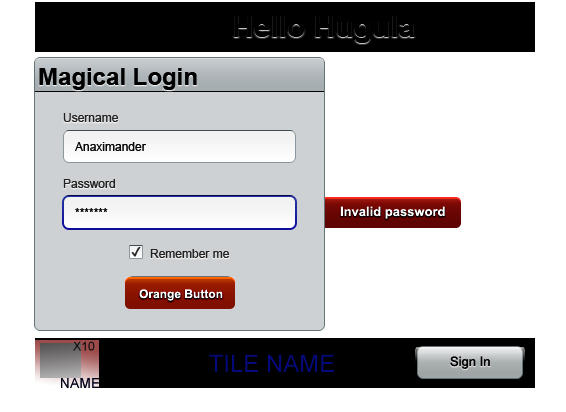
<style>
.page{position:relative;width:566px;height:412px;background:#ffffff}
.page>*{position:absolute;margin:0}
.t1{font:24px "Arial-BoldMT";color:#010101}
.t2{font:12px "ArialMT";color:#222222}
.t3{font:12px "ArialMT";color:#080808}
.t4{font:13px "Arial-BoldMT";color:#ffffff}
.t5{font:12px "SegoeUISymbol";color:#222222;font-weight:bold}
.t6{font:12px "Arial-BoldMT";color:#ffffff}
.t7{font:12px "ArialMT";color:#0a0a0a;text-transform:uppercase}
.t8{font:24px "ArialMT";color:#05097a;text-transform:uppercase}
.t9{font:13px "ArialMT";color:#000000}
.t10{font:14px "ArialMT";color:#030314;text-transform:uppercase}
</style>
<div class="page">
<p class="t1" style="left:39px;top:68px;width:158px;height:22px">Magical Login</p>
<p class="t2" style="left:63px;top:113px;width:55px;height:9px">Username</p>
<p class="t3" style="left:75px;top:142px;width:71px;height:9px">Anaximander</p>
<p class="t2" style="left:63px;top:179px;width:52px;height:9px">Password</p>
<p class="t3" style="left:75px;top:208px;width:33px;height:4px">*******</p>
<p class="t4" style="left:340px;top:206px;width:105px;height:13px">Invalid password</p>
<p class="t5" style="left:131px;top:246px;width:10px;height:11px">✓</p>
<p class="t2" style="left:150px;top:249px;width:79px;height:9px">Remember me</p>
<p class="t6" style="left:139px;top:289px;width:84px;height:12px">Orange Button</p>
<p class="t7" style="left:73px;top:341px;width:22px;height:10px">x10</p>
<p class="t8" style="left:209px;top:354px;width:125px;height:18px">Tile name</p>
<p class="t9" style="left:450px;top:356px;width:40px;height:13px">Sign In</p>
<p class="t10" style="left:61px;top:378px;width:39px;height:10px">Name</p>
</div>
